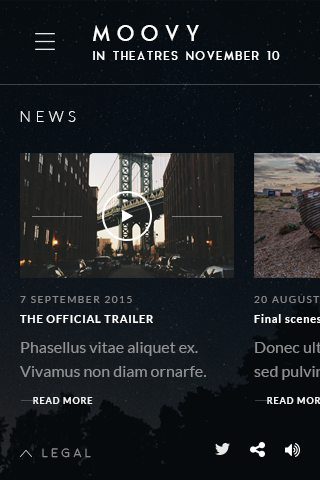
<style>
.page{position:relative;width:320px;height:480px}
.page>*{position:absolute;margin:0}
.t1{font:22px "AquaGrotesque";letter-spacing:0.2em;color:#ffffff;text-transform:uppercase}
.t2{font:12px "AquaGrotesque";letter-spacing:0.05em;color:#ffffff;text-transform:uppercase}
.t3{font:15px "Lato-Light";letter-spacing:0.3em;color:#ffffff;text-transform:uppercase}
.t4{font:10px "Lato-Regular";letter-spacing:0.15em;color:#858688;text-transform:uppercase}
.t5{font:11px "Lato-Bold";letter-spacing:0.07em;color:#ffffff;text-transform:uppercase}
.t6{font:16px/24px "Lato-Regular";color:#919394}
.t7{font:9px "Lato-Bold";letter-spacing:0.1em;color:#ffffff;text-transform:uppercase}
.t8{font:12px "Moon-Light";letter-spacing:0.3em;text-transform:uppercase}
</style>
<div class="page">
<p class="t1" style="left:93px;top:25px;width:106px;height:16px">moovy</p>
<p class="t2" style="left:93px;top:51px;width:187px;height:9px">IN THEATRES NoveMBER 10</p>
<p class="t3" style="left:20px;top:111px;width:56px;height:11px;opacity:0.9">news</p>
<p class="t4" style="left:20px;top:296px;width:112px;height:7px">7 September 2015</p>
<p class="t5" style="left:20px;top:315px;width:133px;height:8px">the official trailer</p>
<p class="t6" style="left:20px;top:342px;width:186px;height:35px">Phasellus vitae aliquet ex. Vivamus non diam ornarfe.</p>
<p class="t7" style="left:33px;top:397px;width:60px;height:7px;opacity:0.9">read more</p>
<p class="t8" style="left:42px;top:448px;width:49px;height:10px">legal</p>
</div>
